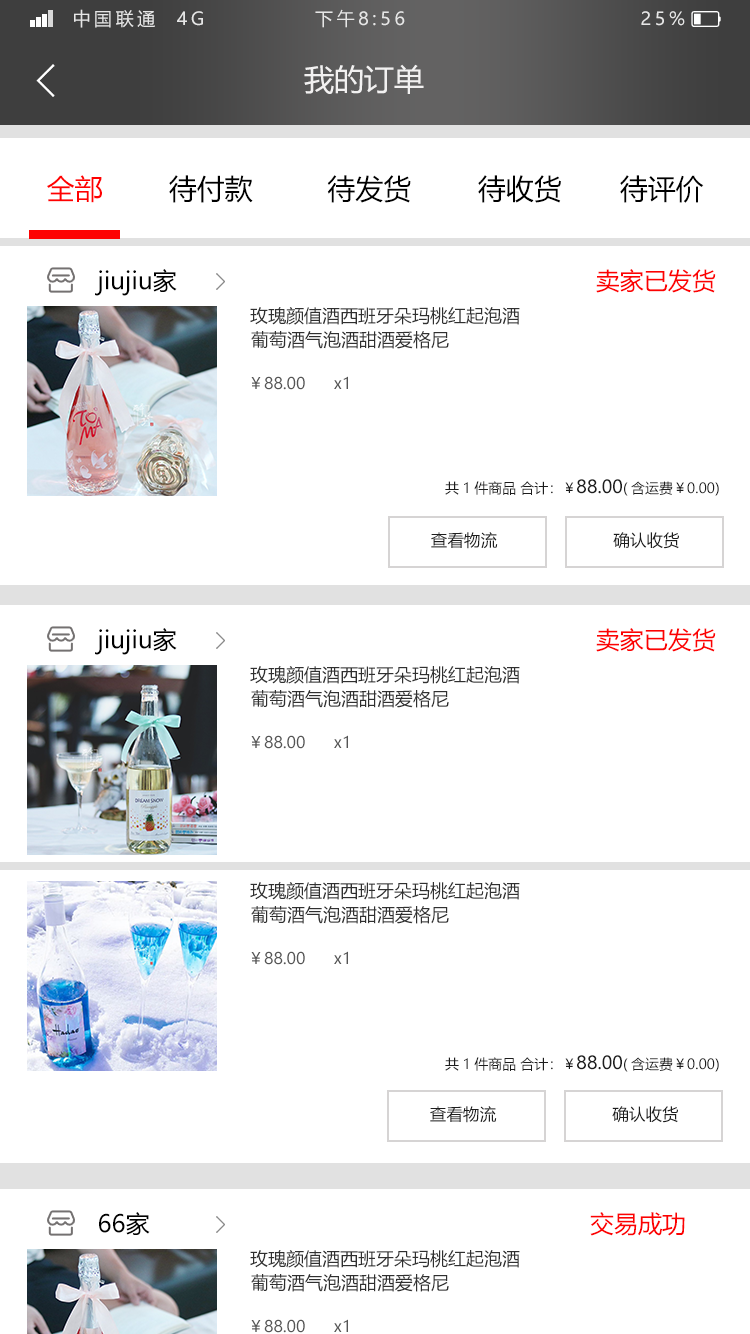
<style>
.page{position:relative;width:750px;height:1334px;background:#ffffff}
.page>*{position:absolute;margin:0}
.t1{font:18px "MicrosoftYaHei";letter-spacing:0.2em;color:#e6e6e6}
.t2{font:30px "MicrosoftYaHei";color:#f2f1f1}
.t3{font:28px "MicrosoftYaHei";color:#000000}
.t4{font:28px "MicrosoftYaHei";color:#ff0101}
.t5{font:24px "MicrosoftYaHei";color:#000000}
.t6{font:24px "MicrosoftYaHei";color:#fc0202}
.t7{font:18px "MicrosoftYaHei";color:#303030}
.t8{font:16px "MicrosoftYaHei";color:#555555}
.t9{font:14px "MicrosoftYaHei";color:#1d1d1d}
.t10{font:18px "MicrosoftYaHei";color:#1d1d1d}
.t11{font:16.6px "MicrosoftYaHei";color:#1d1d1d}
</style>
<div class="page">
<p class="t1" style="left:74px;top:9px;width:611px;height:19px">中国联通  4G            下午8:56                          25%</p>
<p class="t2" style="left:304px;top:64px;width:120px;height:30px">我的订单</p>
<p class="t3" style="left:47px;top:175px;width:657px;height:28px"><span class="t4">全部        </span>待付款         待发货        待收货       待评价</p>
<p class="t5" style="left:95px;top:269px;width:621px;height:27px">jiujiu家                                                           <span class="t6">卖家已发货</span></p>
<p class="t7" style="left:250px;top:307px;width:270px;height:18px">玫瑰颜值酒西班牙朵玛桃红起泡酒</p>
<p class="t7" style="left:251px;top:331px;width:198px;height:18px">葡萄酒气泡酒甜酒爱格尼</p>
<p class="t8" style="left:251px;top:376px;width:97px;height:14px">￥88.00      x1</p>
<p class="t9" style="left:445px;top:479px;width:274px;height:17px">共1件商品 合计：￥<span class="t10">88.00</span>(含运费￥0.00)</p>
<p class="t11" style="left:431px;top:532px;width:67px;height:17px">查看物流</p>
<p class="t11" style="left:613px;top:532px;width:66px;height:17px">确认收货</p>
<p class="t5" style="left:95px;top:628px;width:621px;height:27px">jiujiu家                                                           <span class="t6">卖家已发货</span></p>
<p class="t7" style="left:250px;top:666px;width:270px;height:18px">玫瑰颜值酒西班牙朵玛桃红起泡酒</p>
<p class="t7" style="left:251px;top:690px;width:198px;height:18px">葡萄酒气泡酒甜酒爱格尼</p>
<p class="t8" style="left:251px;top:735px;width:97px;height:14px">￥88.00      x1</p>
<p class="t7" style="left:250px;top:882px;width:270px;height:18px">玫瑰颜值酒西班牙朵玛桃红起泡酒</p>
<p class="t7" style="left:251px;top:906px;width:198px;height:18px">葡萄酒气泡酒甜酒爱格尼</p>
<p class="t8" style="left:251px;top:951px;width:97px;height:14px">￥88.00      x1</p>
<p class="t9" style="left:445px;top:1055px;width:274px;height:17px">共1件商品 合计：￥<span class="t10">88.00</span>(含运费￥0.00)</p>
<p class="t11" style="left:430px;top:1106px;width:67px;height:17px">查看物流</p>
<p class="t11" style="left:612px;top:1106px;width:66px;height:17px">确认收货</p>
<p class="t6" style="left:99px;top:1212px;width:586px;height:24px"><span class="t5">66家                                                              </span>交易成功</p>
<p class="t7" style="left:250px;top:1250px;width:270px;height:18px">玫瑰颜值酒西班牙朵玛桃红起泡酒</p>
<p class="t7" style="left:251px;top:1274px;width:198px;height:18px">葡萄酒气泡酒甜酒爱格尼</p>
<p class="t8" style="left:251px;top:1319px;width:97px;height:14px">￥88.00      x1</p>
</div>
